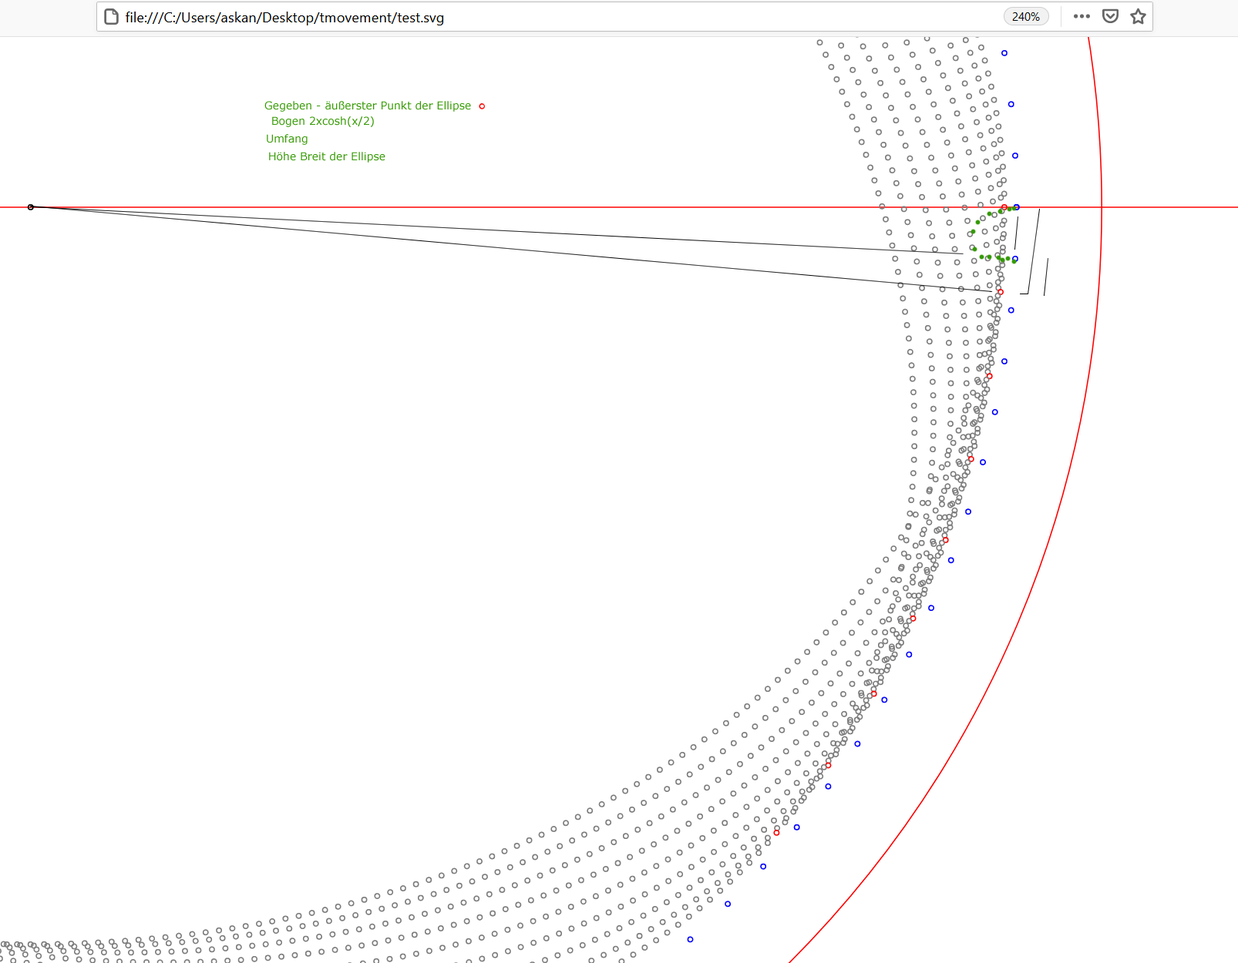
<style>
.page{position:relative;width:1238px;height:963px;background:#ffffff}
.page>*{position:absolute;margin:0}
.t1{font:10.8px "Verdana";color:#339900}
</style>
<div class="page">
<p class="t1" style="left:264px;top:101px;width:207px;height:11px">Gegeben - äußerster Punkt der Ellipse</p>
<p class="t1" style="left:272px;top:116px;width:102px;height:11px">Bogen 2xcosh(x/2)</p>
<p class="t1" style="left:267px;top:134px;width:41px;height:11px">Umfang</p>
<p class="t1" style="left:269px;top:152px;width:116px;height:11px">Höhe Breit der Ellipse</p>
</div>
